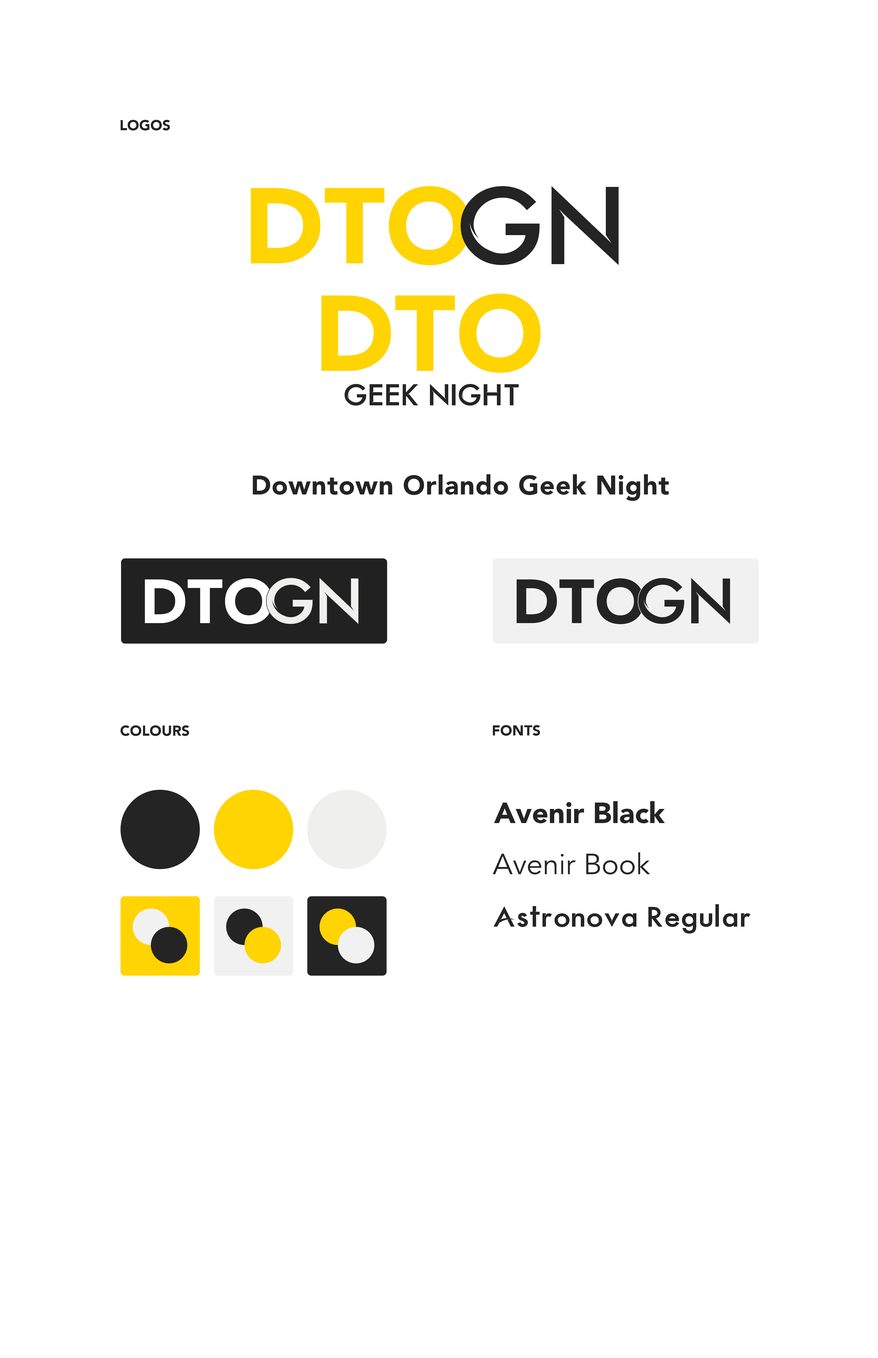
<style>
.page{position:relative;width:878px;height:1358px;background:#ffffff}
.page>*{position:absolute;margin:0}
.t1{font:14.4px "Avenir-Black";color:#242424}
.t2{font:105.3px "Astronova";color:#242424}
.t3{font:106.5px "Avenir-Black";color:#ffd400}
.t4{font:26.6px "Avenir-Black";letter-spacing:0.024em;color:#242424}
.t5{font:61.8px "Avenir-Black";color:#ffffff}
.t6{font:61.2px "Astronova";color:#efefee}
.t7{font:61.8px "Avenir-Black";color:#242424}
.t8{font:61.2px "Astronova";color:#242424}
.t9{font:29px "Avenir-Black";color:#242424}
.t10{font:29px "Avenir-Book";color:#242424}
.t11{font:27px "Astronova";color:#242424}
</style>
<div class="page">
<p class="t1" style="left:121px;top:120px;width:49px;height:10px">LOGOS</p>
<p class="t2" style="left:461px;top:186px;width:158px;height:79px">GN</p>
<p class="t3" style="left:251px;top:186px;width:220px;height:79px">DTO</p>
<p class="t4" style="left:253px;top:474px;width:416px;height:27px">Downtown Orlando Geek Night</p>
<p class="t5" style="left:145px;top:578px;width:128px;height:46px">DTO</p>
<p class="t6" style="left:267px;top:578px;width:92px;height:46px">GN</p>
<p class="t7" style="left:517px;top:578px;width:127px;height:46px">DTO</p>
<p class="t8" style="left:639px;top:578px;width:91px;height:46px">GN</p>
<p class="t1" style="left:120px;top:725px;width:69px;height:11px">COLOURS</p>
<p class="t1" style="left:493px;top:725px;width:47px;height:10px">FONTS</p>
<p class="t9" style="left:494px;top:801px;width:171px;height:22px">Avenir Black</p>
<p class="t10" style="left:493px;top:852px;width:158px;height:22px">Avenir Book</p>
<p class="t11" style="left:494px;top:904px;width:257px;height:29px">Astronova Regular</p>
</div>
